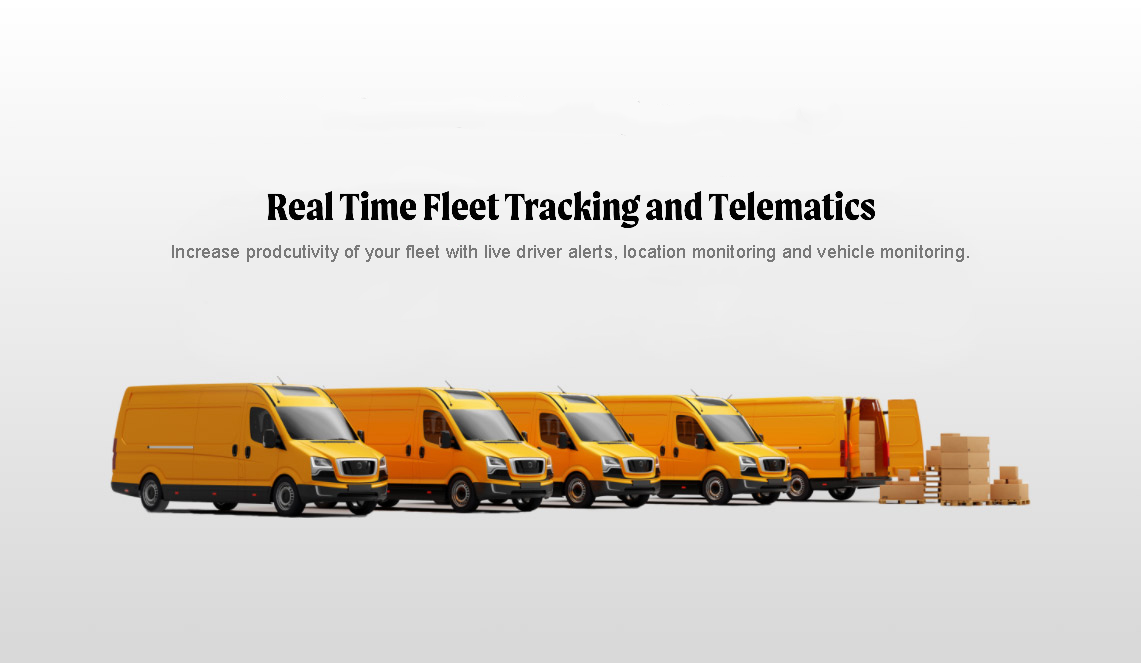
<style>
.page{position:relative;width:1141px;height:663px}
.page>*{position:absolute;margin:0}
.t1{font:18px "ArialMT";letter-spacing:0.01em;color:#797979}
</style>
<div class="page">
<p class="t1" style="left:172px;top:245px;width:797px;height:17px">Increase prodcutivity of your fleet with live driver alerts, location monitoring and vehicle monitoring.</p>
</div>
